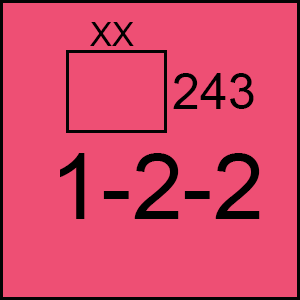
<style>
.page{position:relative;width:300px;height:300px;background:#ee4f74}
.page>*{position:absolute;margin:0}
.t1{font:33.3px "ArialMT";color:#000000}
.t2{font:50px "ArialMT";color:#000000}
.t3{font:91.7px "ArialMT";color:#000000}
</style>
<div class="page">
<p class="t1" style="left:90px;top:22px;width:44px;height:24px">XX</p>
<p class="t2" style="left:173px;top:73px;width:81px;height:36px">243</p>
<p class="t3" style="left:60px;top:153px;width:200px;height:66px">1-2-2</p>
</div>
